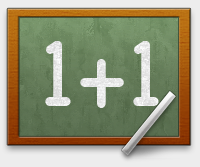
<style>
.page{position:relative;width:200px;height:167px}
.page>*{position:absolute;margin:0}
.t1{font:96.4px "Chalkboard";color:#e8e8e8}
</style>
<div class="page">
<p class="t1" style="left:45px;top:41px;width:114px;height:67px">1+1</p>
</div>
